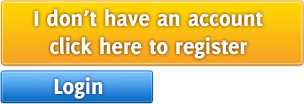
<style>
.page{position:relative;width:304px;height:104px}
.page>*{position:absolute;margin:0}
.t1{font:24px "Delicious-Heavy";color:#fefff4}
</style>
<div class="page">
<p class="t1" style="left:34px;top:9px;width:229px;height:50px;text-align:center">I don’t have an account<br>click here to register</p>
<p class="t1" style="left:54px;top:77px;width:49px;height:22px">Login</p>
</div>
